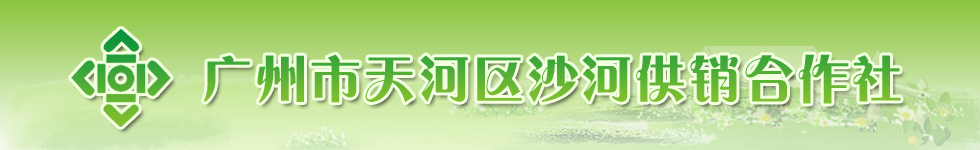
<style>
.page{position:relative;width:980px;height:150px}
.page>*{position:absolute;margin:0}
.t1{font:54.2px "FZCHYJW--GB1-0"}
</style>
<div class="page">
<p class="t1" style="left:204px;top:54px;width:697px;height:50px">广州市天河区沙河供销合作社</p>
</div>
